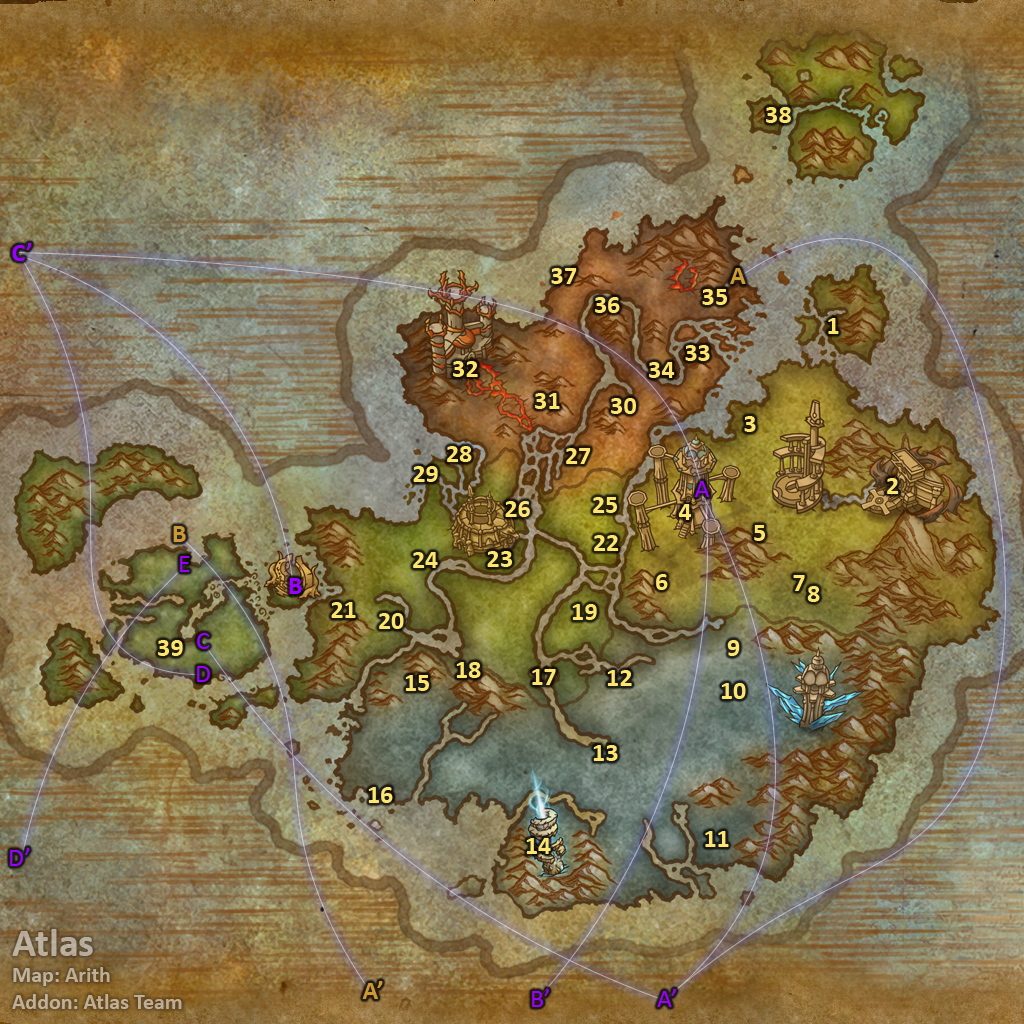
<style>
.page{position:relative;width:1024px;height:1024px}
.page>*{position:absolute;margin:0}
.t1{font:26px "Calibri-Bold";color:#fee570}
.t2{font:26px "Calibri-Bold";color:#9900ff}
.t3{font:26px "Calibri-Bold";color:#cc9933}
.t4{font:26px "Calibri";color:#9900ff}
.t5{font:22px "Calibri-Bold";color:#bdae9a}
.t6{font:40px "Calibri-Bold";color:#bdae9a}
</style>
<div class="page">
<p class="t1" style="left:766px;top:107px;width:25px;height:16px">38</p>
<p class="t2" style="left:12px;top:243px;width:20px;height:18px">C’</p>
<p class="t1" style="left:551px;top:268px;width:26px;height:16px">37</p>
<p class="t3" style="left:730px;top:268px;width:16px;height:16px">A</p>
<p class="t1" style="left:702px;top:289px;width:25px;height:16px">35</p>
<p class="t1" style="left:595px;top:297px;width:25px;height:16px">36</p>
<p class="t1" style="left:828px;top:318px;width:11px;height:16px">1</p>
<p class="t1" style="left:685px;top:345px;width:25px;height:16px">33</p>
<p class="t1" style="left:453px;top:361px;width:25px;height:16px">32</p>
<p class="t1" style="left:649px;top:362px;width:26px;height:16px">34</p>
<p class="t1" style="left:535px;top:393px;width:25px;height:16px">31</p>
<p class="t1" style="left:611px;top:398px;width:25px;height:16px">30</p>
<p class="t1" style="left:744px;top:416px;width:12px;height:16px">3</p>
<p class="t1" style="left:447px;top:446px;width:25px;height:16px">28</p>
<p class="t1" style="left:566px;top:448px;width:25px;height:16px">27</p>
<p class="t1" style="left:413px;top:466px;width:25px;height:16px">29</p>
<p class="t4" style="left:694px;top:481px;width:16px;height:16px">A</p>
<p class="t1" style="left:887px;top:478px;width:12px;height:16px">2</p>
<p class="t1" style="left:593px;top:497px;width:24px;height:16px">25</p>
<p class="t1" style="left:505px;top:501px;width:25px;height:16px">26</p>
<p class="t1" style="left:678px;top:504px;width:14px;height:16px">4</p>
<p class="t3" style="left:173px;top:526px;width:13px;height:16px">B</p>
<p class="t1" style="left:754px;top:525px;width:11px;height:16px">5</p>
<p class="t1" style="left:594px;top:535px;width:25px;height:16px">22</p>
<p class="t4" style="left:180px;top:556px;width:10px;height:16px">E</p>
<p class="t1" style="left:413px;top:552px;width:25px;height:16px">24</p>
<p class="t1" style="left:487px;top:551px;width:25px;height:16px">23</p>
<p class="t2" style="left:289px;top:578px;width:13px;height:16px">B</p>
<p class="t1" style="left:656px;top:574px;width:12px;height:16px">6</p>
<p class="t1" style="left:793px;top:575px;width:12px;height:16px">7</p>
<p class="t1" style="left:807px;top:586px;width:13px;height:16px">8</p>
<p class="t1" style="left:331px;top:602px;width:25px;height:16px">21</p>
<p class="t1" style="left:572px;top:604px;width:25px;height:16px">19</p>
<p class="t1" style="left:379px;top:613px;width:25px;height:16px">20</p>
<p class="t1" style="left:158px;top:640px;width:25px;height:16px">39</p>
<p class="t4" style="left:197px;top:633px;width:13px;height:16px">C</p>
<p class="t1" style="left:727px;top:640px;width:13px;height:16px">9</p>
<p class="t1" style="left:456px;top:662px;width:25px;height:16px">18</p>
<p class="t4" style="left:197px;top:666px;width:13px;height:16px">D</p>
<p class="t1" style="left:405px;top:675px;width:24px;height:16px">15</p>
<p class="t1" style="left:532px;top:669px;width:24px;height:16px">17</p>
<p class="t1" style="left:607px;top:670px;width:25px;height:16px">12</p>
<p class="t1" style="left:721px;top:683px;width:25px;height:16px">10</p>
<p class="t1" style="left:593px;top:745px;width:25px;height:16px">13</p>
<p class="t1" style="left:368px;top:787px;width:25px;height:16px">16</p>
<p class="t1" style="left:705px;top:831px;width:24px;height:16px">11</p>
<p class="t1" style="left:526px;top:838px;width:25px;height:16px">14</p>
<p class="t4" style="left:10px;top:848px;width:20px;height:18px">D’</p>
<p class="t5" style="left:12px;top:929px;width:170px;height:80px"><span class="t6">Atlas<br></span>Map: Arith<br>Addon: Atlas Team</p>
<p class="t3" style="left:362px;top:981px;width:21px;height:18px">A’</p>
<p class="t4" style="left:532px;top:989px;width:17px;height:18px">B’</p>
<p class="t4" style="left:657px;top:989px;width:19px;height:18px">A’</p>
</div>
